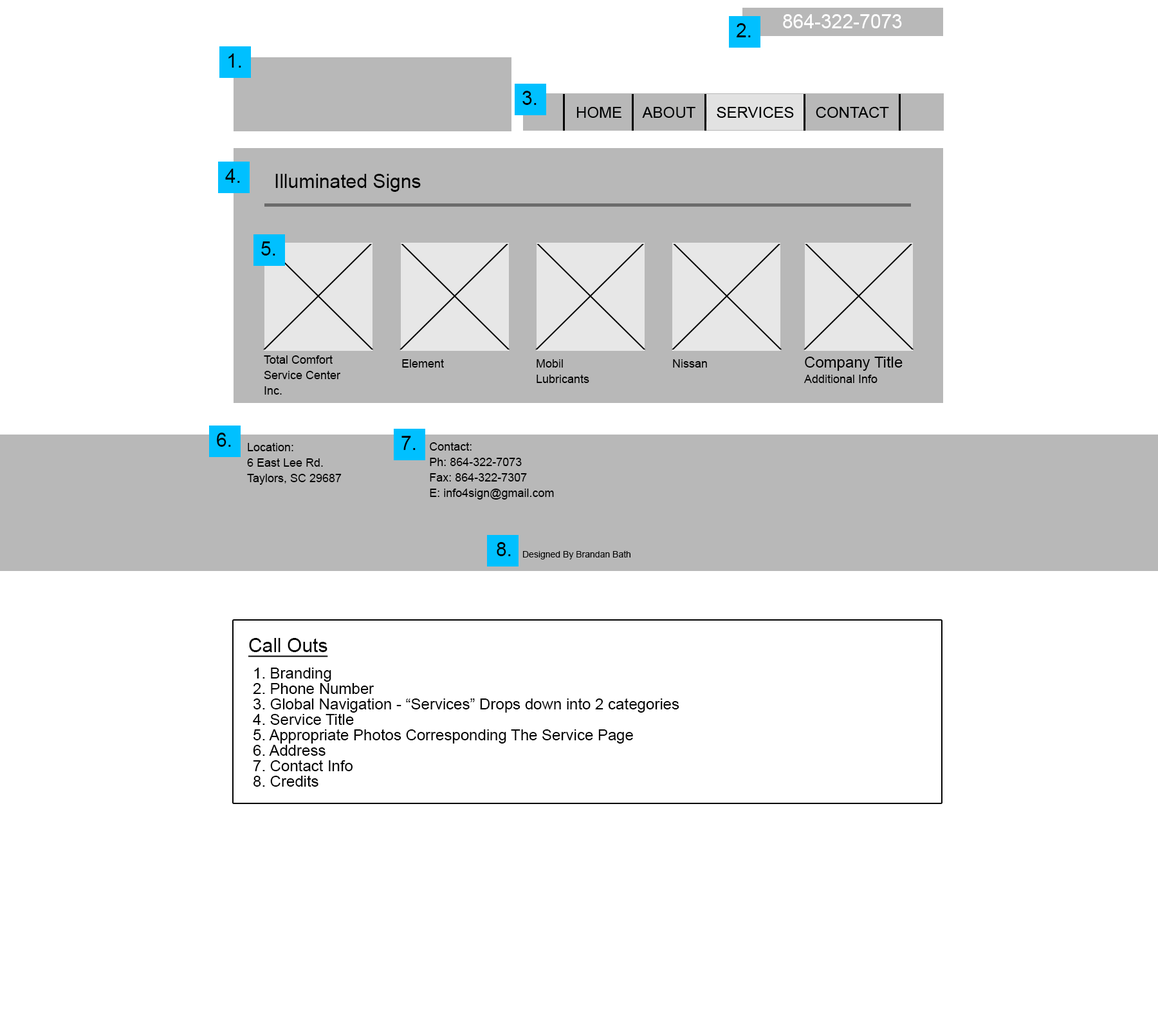
<style>
.page{position:relative;width:1158px;height:1030px;background:#ffffff}
.page>*{position:absolute;margin:0}
.t1{font:19.3px "ArialMT";color:#ffffff}
.t2{font:19.3px "ArialMT";color:#000203}
.t3{font:19.3px "ArialMT";color:#000000}
.t4{font:11.6px/15.4px "ArialMT";color:#000000}
.t5{font:11.6px "ArialMT";color:#000000}
.t6{font:15.4px/15.4px "ArialMT";color:#000000}
.t7{font:9px "ArialMT";color:#000000}
.t8{font:19.3px "ArialMT";color:#000000;text-decoration:underline}
</style>
<div class="page">
<p class="t1" style="left:783px;top:14px;width:119px;height:14px">864-322-7073</p>
<p class="t2" style="left:736px;top:23px;width:15px;height:14px">2.</p>
<p class="t2" style="left:228px;top:53px;width:13px;height:15px">1.</p>
<p class="t2" style="left:522px;top:91px;width:15px;height:14px">3.</p>
<p class="t2" style="left:225px;top:169px;width:15px;height:14px">4.</p>
<p class="t3" style="left:275px;top:174px;width:146px;height:18px">Illuminated Signs</p>
<p class="t2" style="left:261px;top:241px;width:14px;height:14px">5.</p>
<p class="t4" style="left:264px;top:355px;width:77px;height:39px">Total Comfort<br>Service Center<br>Inc.</p>
<p class="t5" style="left:402px;top:359px;width:42px;height:8px">Element</p>
<p class="t4" style="left:537px;top:359px;width:52px;height:24px">Mobil<br>Lubricants</p>
<p class="t5" style="left:673px;top:359px;width:34px;height:8px">Nissan</p>
<p class="t4" style="left:804px;top:356px;width:99px;height:27px"><span class="t6">Company Title<br></span>Additional Info</p>
<p class="t2" style="left:217px;top:432px;width:14px;height:15px">6.</p>
<p class="t2" style="left:402px;top:436px;width:14px;height:14px">7.</p>
<p class="t4" style="left:247px;top:443px;width:95px;height:42px">Location:<br>6 East Lee Rd.<br>Taylors, SC 29687</p>
<p class="t4" style="left:430px;top:442px;width:124px;height:57px">Contact:<br>Ph: 864-322-7073<br>Fax: 864-322-7307<br>E: info4sign@gmail.com</p>
<p class="t2" style="left:497px;top:542px;width:14px;height:14px">8.</p>
<p class="t7" style="left:523px;top:550px;width:108px;height:9px">Designed By Brandan Bath</p>
<p class="t8" style="left:248px;top:638px;width:80px;height:19px">Call Outs</p>
<p class="t6" style="left:253px;top:667px;width:426px;height:119px">1. Branding<br>2. Phone Number<br>3. Global Navigation - “Services” Drops down into 2 categories<br>4. Service Title<br>5. Appropriate Photos Corresponding The Service Page<br>6. Address<br>7. Contact Info<br>8. Credits</p>
</div>
